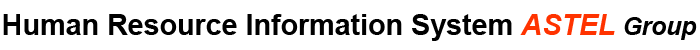
<style>
.page{position:relative;width:700px;height:50px;background:#ffffff}
.page>*{position:absolute;margin:0}
.t1{font:29.2px "Arial-BoldMT";color:#000000}
.t2{font:29.2px "Arial-BoldItalicMT";color:#ff3300}
.t3{font:25px "Arial-BoldItalicMT";color:#000000}
</style>
<div class="page">
<p class="t1" style="left:3px;top:14px;width:694px;height:27px">Human Resource Information System <span class="t2">ASTEL </span><span class="t3">Group</span></p>
</div>
